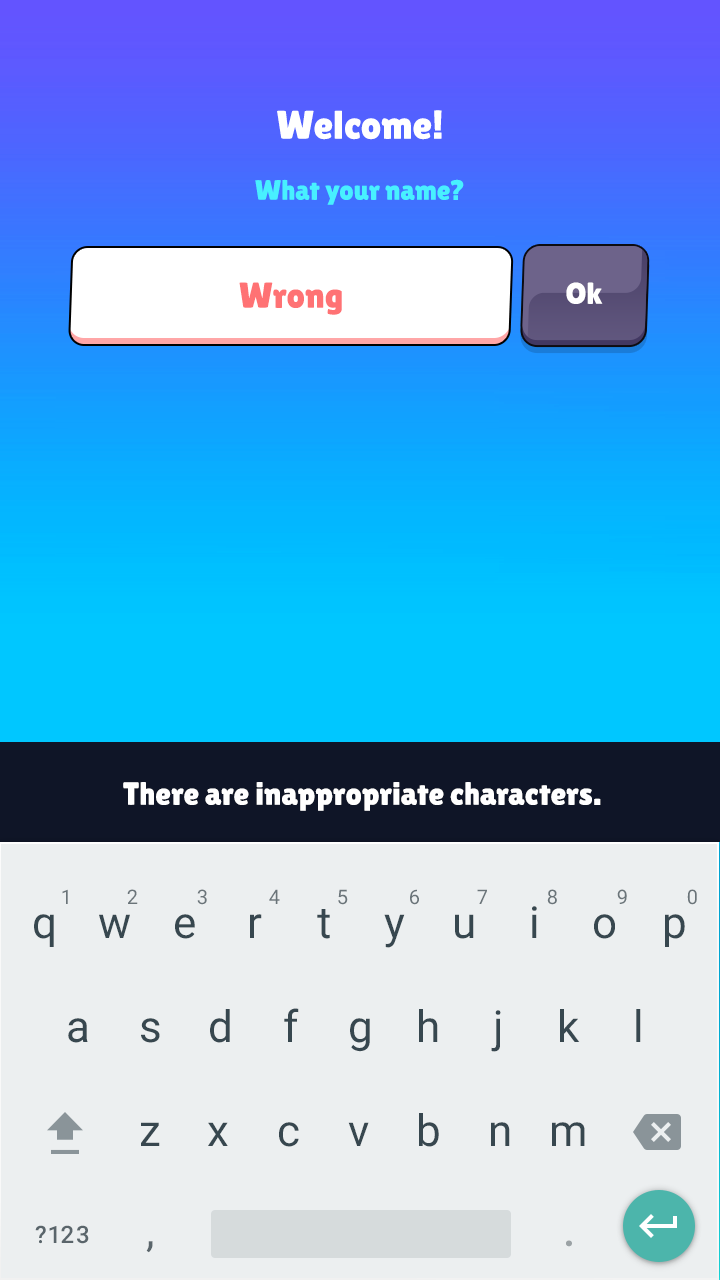
<style>
.page{position:relative;width:720px;height:1280px;background:#eceff0}
.page>*{position:absolute;margin:0}
.t1{font:40px "LilitaOne";color:#ffffff}
.t2{font:28px "LilitaOne";color:#48f0ff}
.t3{font:36px "LilitaOne";color:#ff7274}
.t4{font:30px "LilitaOne";color:#ffffff}
.t5{font:32px "LilitaOne";color:#ffffff}
</style>
<div class="page">
<p class="t1" style="left:277px;top:110px;width:165px;height:30px">Welcome!</p>
<p class="t2" style="left:255px;top:179px;width:209px;height:26px">What your name?</p>
<p class="t3" style="left:239px;top:282px;width:103px;height:33px">Wrong</p>
<p class="t4" style="left:566px;top:282px;width:37px;height:22px">Ok</p>
<p class="t5" style="left:123px;top:782px;width:478px;height:29px">There are inappropriate characters.</p>
</div>
